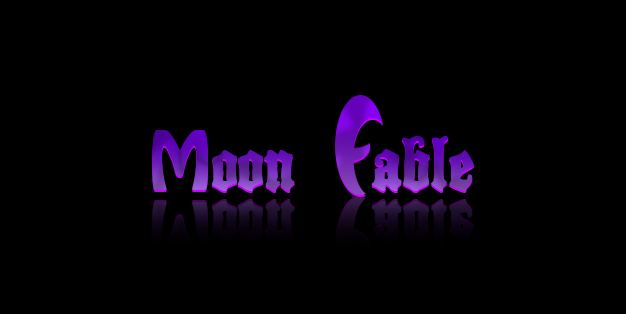
<style>
.page{position:relative;width:626px;height:314px;background:#000000}
.page>*{position:absolute;margin:0}
.t1{font:72px "BlackCastleMF"}
.t2{font:72px "HoboStd"}
</style>
<div class="page">
<p class="t1" style="left:152px;top:130px;width:143px;height:61px"><span class="t2">M</span>oon</p>
<p class="t1" style="left:371px;top:136px;width:103px;height:55px">able</p>
</div>
